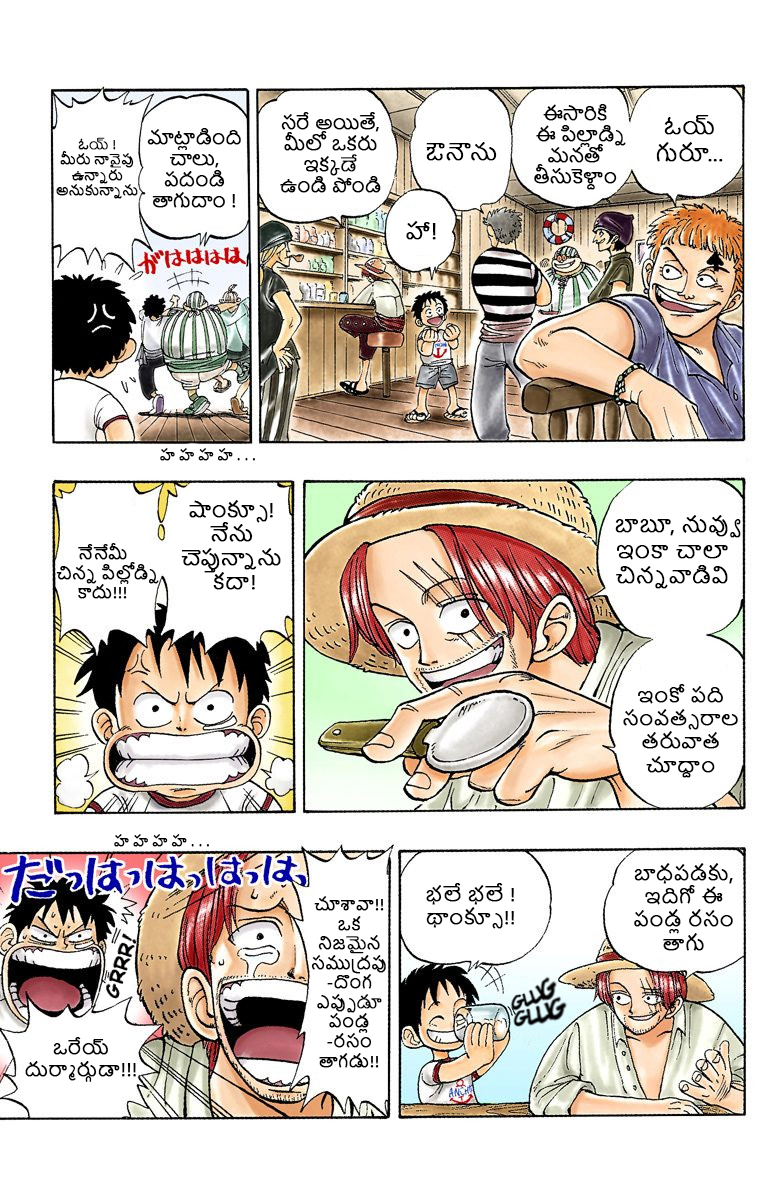
<style>
.page{position:relative;width:780px;height:1200px;background:#ffffff}
.page>*{position:absolute;margin:0}
.t1{font:17.7px "NirmalaUI";color:#000000;font-weight:bold}
.t2{font:22px "NirmalaUI";color:#000000;font-weight:bold}
.t3{font:12.9px "NirmalaUI";color:#000000;font-weight:bold}
.t4{font:14.1px "NirmalaUI";color:#000000;font-weight:bold}
.t5{font:20.1px "NirmalaUI";color:#000000;font-weight:bold}
.t6{font:21.2px "NirmalaUI";color:#000000;font-weight:bold}
.t7{font:16.2px "NirmalaUI";color:#000000;font-weight:bold}
.t8{font:19.3px "NirmalaUI";color:#000000;font-weight:bold}
.t9{font:16.3px "NirmalaUI";color:#000000;font-weight:bold}
.t10{font:18.2px "NirmalaUI";color:#000000;font-weight:bold}
</style>
<div class="page">
<p class="t1" style="left:280px;top:112px;width:101px;height:81px;text-align:center">సరే అయితే, మీలో ఒకరు ఇక్కడే ఉండి పోండి</p>
<p class="t1" style="left:534px;top:104px;width:92px;height:86px;text-align:center">ఈసారికి <br>ఈ పిల్లాడ్ని మనతో తీసుకెళ్దాం</p>
<p class="t2" style="left:656px;top:115px;width:67px;height:47px;text-align:center">ఓయ్ <br>గురూ...</p>
<p class="t3" style="left:56px;top:137px;width:82px;height:62px;text-align:center">ఓయ్ !<br>మీరు నావైపు ఉన్నారు అనుకున్నాను</p>
<p class="t1" style="left:147px;top:128px;width:94px;height:80px;text-align:center">మాట్లాడింది చాలు, పదండి తాగుదాం !</p>
<p class="t2" style="left:426px;top:142px;width:71px;height:19px">ఔనౌను</p>
<p class="t2" style="left:406px;top:221px;width:30px;height:19px">హా!</p>
<p class="t4" style="left:160px;top:448px;width:95px;height:13px">హ హ హ హ . . .</p>
<p class="t5" style="left:181px;top:500px;width:100px;height:90px;text-align:center">షాంక్సూ! నేను చెప్తున్నాను<br> కదా!</p>
<p class="t6" style="left:615px;top:515px;width:126px;height:74px;text-align:center">బాబూ, నువ్వు ఇంకా చాలా చిన్నవాడివి</p>
<p class="t7" style="left:56px;top:543px;width:103px;height:56px;text-align:center">నేనేమీ <br>చిన్న పిల్లోడ్ని కాదు!!!</p>
<p class="t8" style="left:623px;top:684px;width:115px;height:94px;text-align:center">ఇంకో పది సంవత్సరాల తరువాత చూద్దాం</p>
<p class="t4" style="left:114px;top:834px;width:95px;height:13px">హ హ హ హ . . .</p>
<p class="t8" style="left:634px;top:863px;width:99px;height:88px;text-align:center">బాధపడకు, ఇదిగో ఈ పండ్ల రసం తాగు</p>
<p class="t8" style="left:426px;top:883px;width:88px;height:46px;text-align:center">భలే భలే !<br>థాంక్సూ!!</p>
<p class="t9" style="left:311px;top:896px;width:75px;height:172px;text-align:center">చూశావా!! ఒక నిజమైన సముద్రపు-దొంగ ఎప్పుడూ పండ్ల -రసం  తాగడు!!</p>
<p class="t10" style="left:25px;top:1037px;width:111px;height:45px;text-align:center">ఒరేయ్<br>దుర్మార్గుడా!!!</p>
</div>
